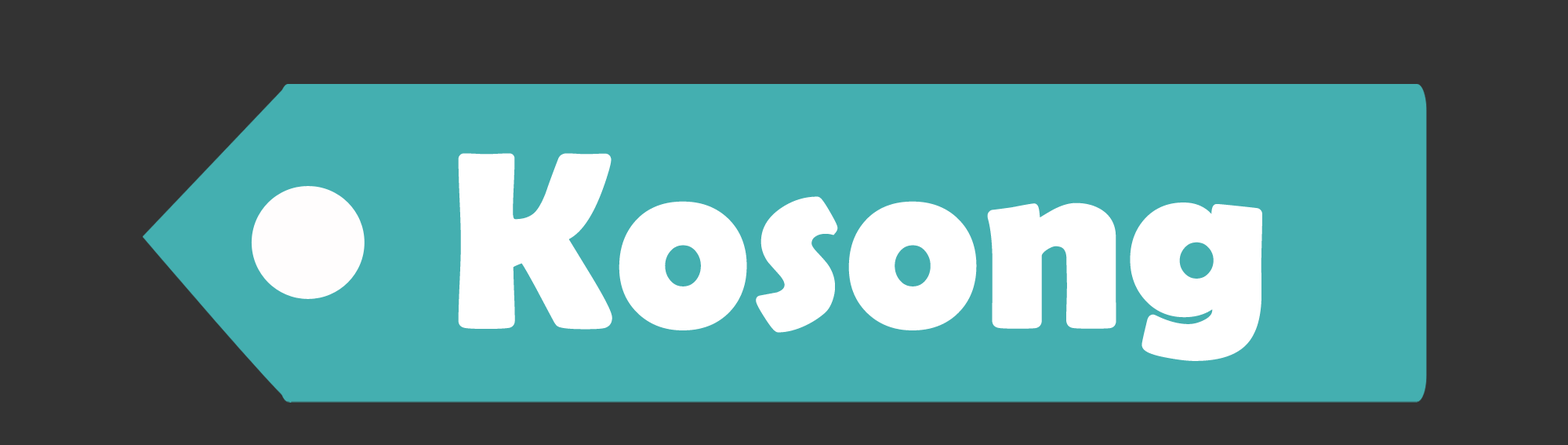
<style>
.page{position:relative;width:1568px;height:445px;background:#333333}
.page>*{position:absolute;margin:0}
.t1{font:244.6px "BerlinSansFBDemi-Bold";color:#ffffff;font-weight:bold}
</style>
<div class="page">
<p class="t1" style="left:458px;top:153px;width:804px;height:208px">Kosong</p>
</div>
